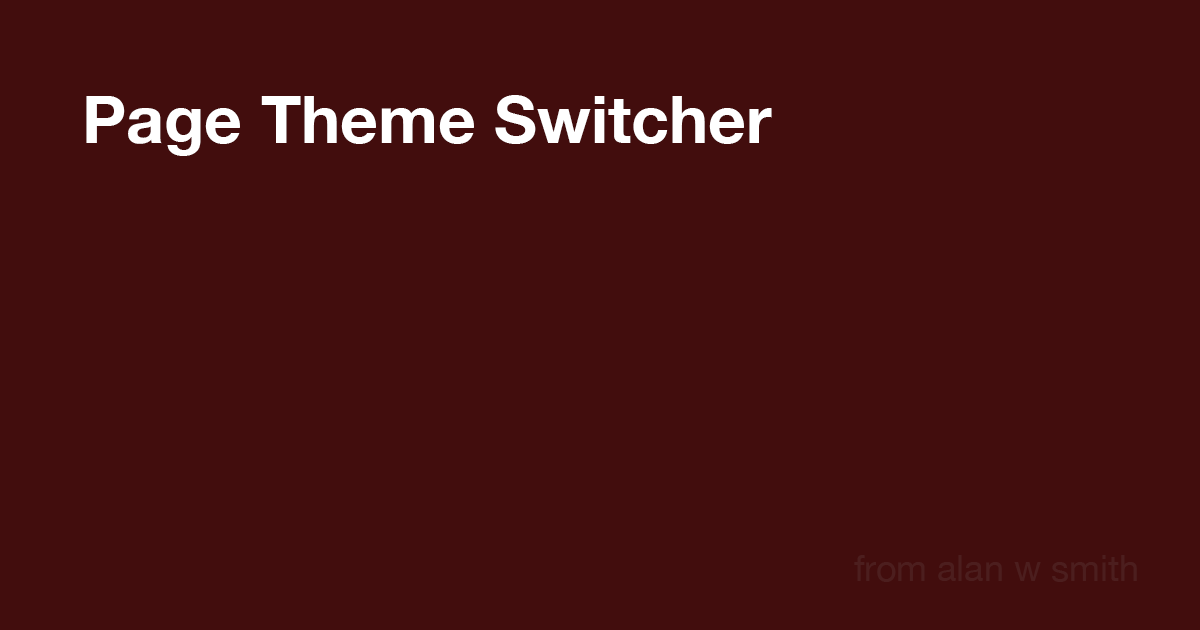
<style>
.page{position:relative;width:1200px;height:630px;background:#420d0d}
.page>*{position:absolute;margin:0}
.t1{font:66px "HelveticaNeue-Bold";color:#ffffff}
.t2{font:36px "HelveticaNeue";color:#4c1e1e}
</style>
<div class="page">
<p class="t1" style="left:86px;top:95px;width:686px;height:61px">Page Theme Switcher</p>
<p class="t2" style="left:854px;top:555px;width:283px;height:27px">from alan w smith</p>
</div>
